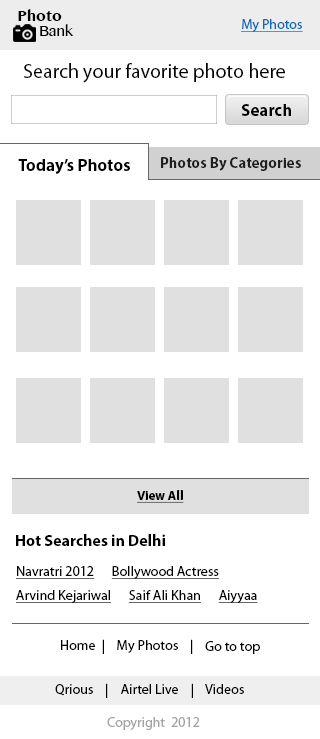
<style>
.page{position:relative;width:320px;height:739px;background:#ffffff}
.page>*{position:absolute;margin:0}
.t1{font:14.7px/15.5px "TamilMN-Bold";color:#000000}
.t2{font:14.7px/15.5px "TamilMN";color:#000000}
.t3{font:14px "MyriadPro-Regular";color:#0066cc;text-decoration:underline}
.t4{font:20px "MyriadPro-Regular";color:#000000}
.t5{font:17px "MyriadPro-Bold";color:#000000}
.t6{font:15px "MyriadPro-Bold";color:#1f1f1f}
.t7{font:13px "MyriadPro-Bold";color:#000000;text-decoration:underline}
.t8{font:16px "MyriadPro-Bold";color:#000000}
.t9{font:14px/24px "MyriadPro-Regular";color:#000000;text-decoration:underline}
.t10{font:14px "MyriadPro-Regular";color:#000000}
.t11{font:14px "MyriadPro-Regular";color:#a3a3a3}
</style>
<div class="page">
<p class="t1" style="left:18px;top:9px;width:56px;height:27px">Photo<br><span class="t2">     Bank</span></p>
<p class="t3" style="left:241px;top:19px;width:62px;height:13px">My Photos</p>
<p class="t4" style="left:24px;top:63px;width:261px;height:20px">Search your favorite photo here</p>
<p class="t5" style="left:241px;top:104px;width:50px;height:12px">Search</p>
<p class="t5" style="left:18px;top:159px;width:112px;height:15px">Today’s Photos</p>
<p class="t6" style="left:161px;top:157px;width:140px;height:14px">Photos By Categories</p>
<p class="t7" style="left:137px;top:490px;width:47px;height:13px">View All</p>
<p class="t8" style="left:16px;top:534px;width:149px;height:12px">Hot Searches in Delhi</p>
<p class="t9" style="left:16px;top:566px;width:242px;height:37px">Navratri 2012      Bollywood Actress     <br>Arvind Kejariwal      Saif Ali Khan      Aiyyaa</p>
<p class="t10" style="left:61px;top:639px;width:132px;height:15px">Home  |    My Photos    |</p>
<p class="t10" style="left:205px;top:641px;width:55px;height:13px">Go to top</p>
<p class="t10" style="left:55px;top:683px;width:189px;height:15px">Qrious    |    Airtel Live    |    Videos</p>
<p class="t11" style="left:107px;top:717px;width:93px;height:13px">Copyright  2012</p>
</div>
